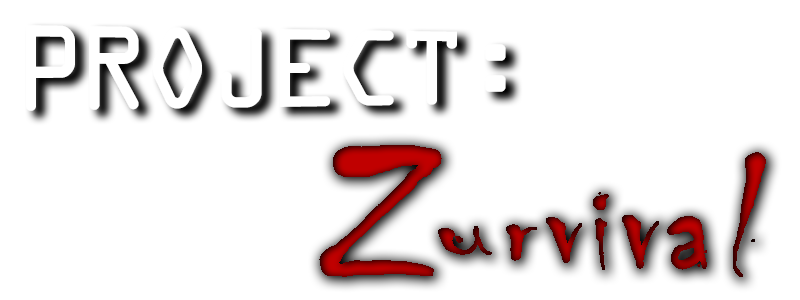
<style>
.page{position:relative;width:800px;height:300px;background:#ffffff}
.page>*{position:absolute;margin:0}
.t1{font:120px "OCRAExtended";letter-spacing:-0.075em;color:#ffffff}
.t2{font:220px "Chiller-Regular";font-weight:bold}
.t3{font:150px "Chiller-Regular";letter-spacing:0.075em}
</style>
<div class="page">
<p class="t1" style="left:26px;top:25px;width:480px;height:86px">PROJECT:</p>
<p class="t2" style="left:319px;top:145px;width:123px;height:132px">Z</p>
<p class="t3" style="left:438px;top:152px;width:328px;height:125px">urvival</p>
</div>
